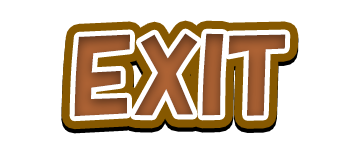
<style>
.page{position:relative;width:360px;height:150px;background:#ffffff}
.page>*{position:absolute;margin:0}
.t1{font:100px "HGSSoeiKakupoptai";color:#99572e}
</style>
<div class="page">
<p class="t1" style="left:74px;top:33px;width:212px;height:84px">EXIT</p>
</div>
